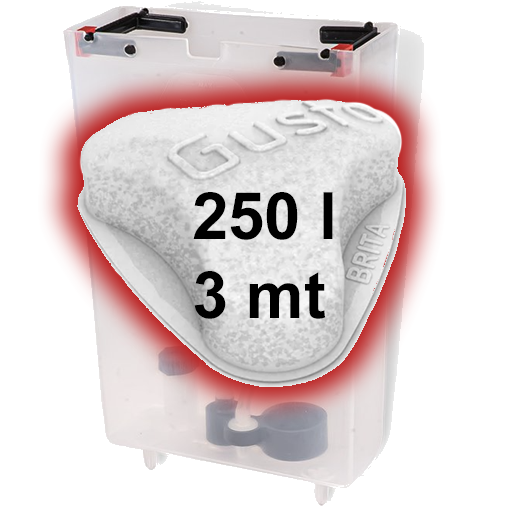
<style>
.page{position:relative;width:512px;height:512px;background:#ffffff}
.page>*{position:absolute;margin:0}
.t1{font:65.2px "Arial-BoldMT";color:#000000}
</style>
<div class="page">
<p class="t1" style="left:193px;top:192px;width:140px;height:127px">250 l<br>3 mt</p>
</div>
